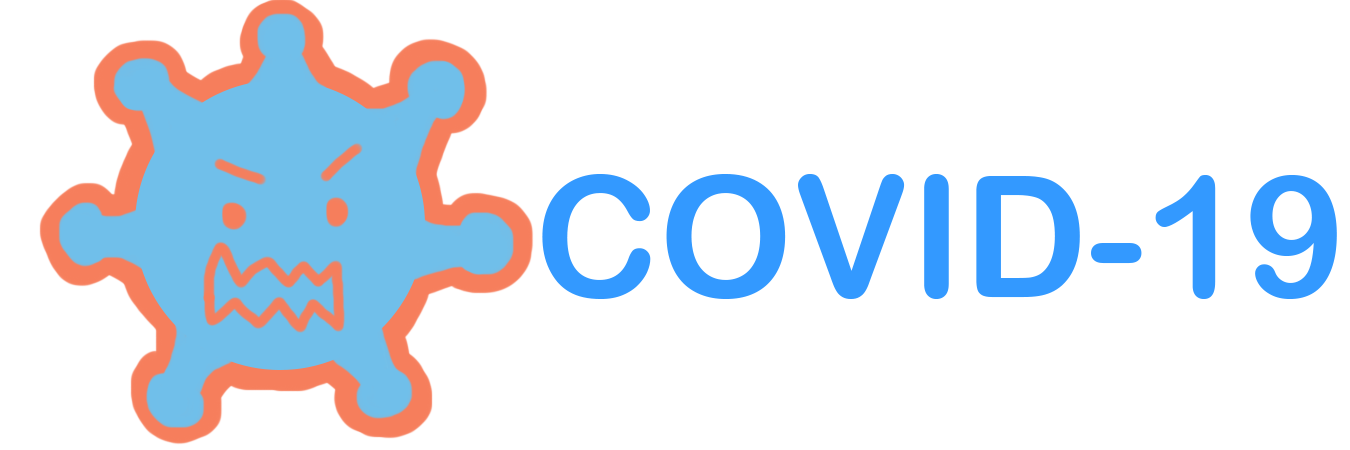
<style>
.page{position:relative;width:1350px;height:450px;background:#ffffff}
.page>*{position:absolute;margin:0}
.t1{font:169.3px "ArialRoundedMTBold";color:#3399ff}
.t2{font:12px "AdobeFanHeitiStd-Bold";color:#ffffff}
</style>
<div class="page">
<p class="t1" style="left:542px;top:174px;width:795px;height:125px"><span class="t2"><br></span>COVID-19</p>
</div>
